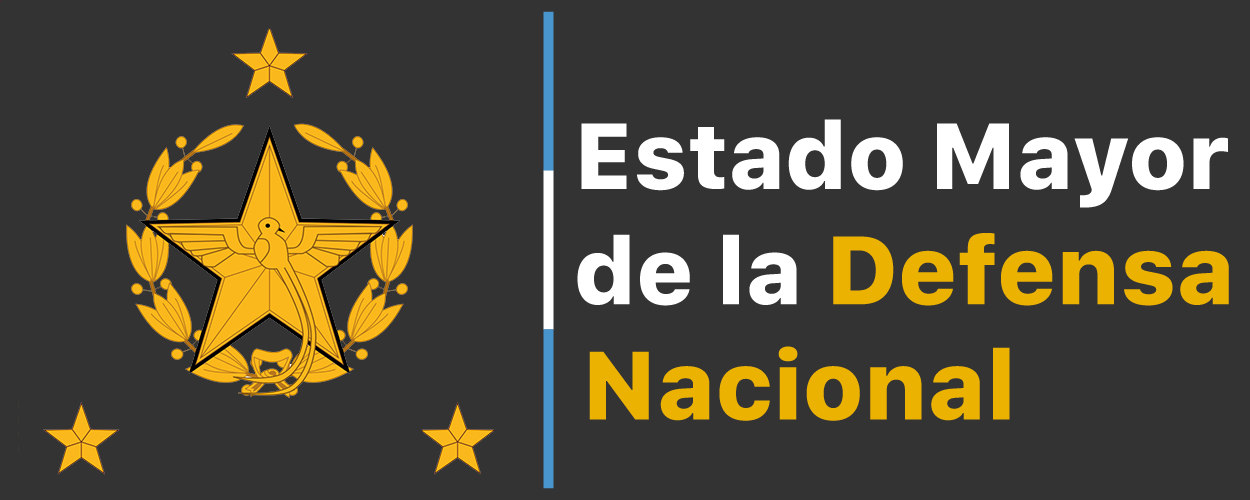
<style>
.page{position:relative;width:1250px;height:500px;background:#333333}
.page>*{position:absolute;margin:0}
.t1{font:93px "SFUIText-Heavy";color:#ffffff}
.t2{font:96px "SFUIText-Heavy";color:#ecb201}
</style>
<div class="page">
<p class="t1" style="left:577px;top:119px;width:652px;height:302px">Estado Mayor <br>           de la <span class="t2">Defensa<br>           Nacional</span></p>
</div>
